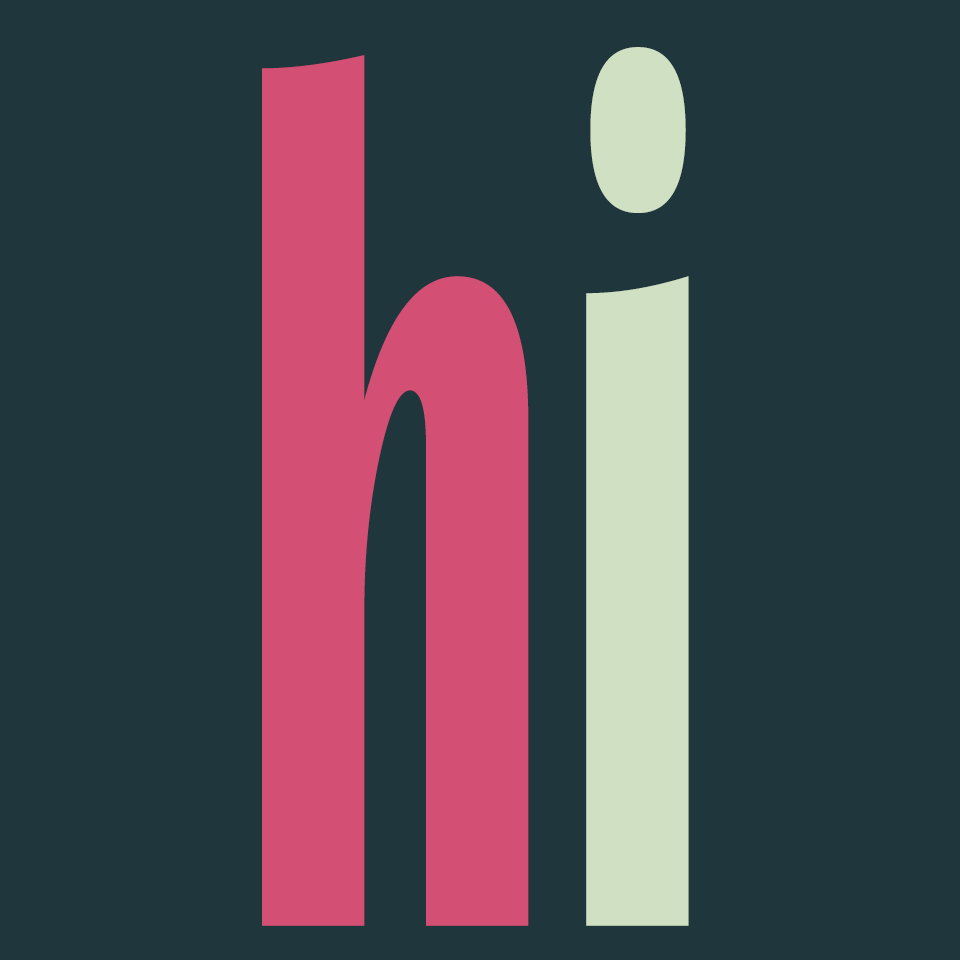
<style>
.page{position:relative;width:960px;height:960px;background:#1f363d}
.page>*{position:absolute;margin:0}
.t1{font:1285.9px "BritannicBold";color:#d34f73;scale:0.44 1}
.t2{font:1285.9px "BritannicBold";color:#cfe0c3;scale:0.44 1}
</style>
<div class="page">
<p class="t1" style="left:262px;top:47px;width:427px;height:879px">h<span class="t2">i</span></p>
</div>
